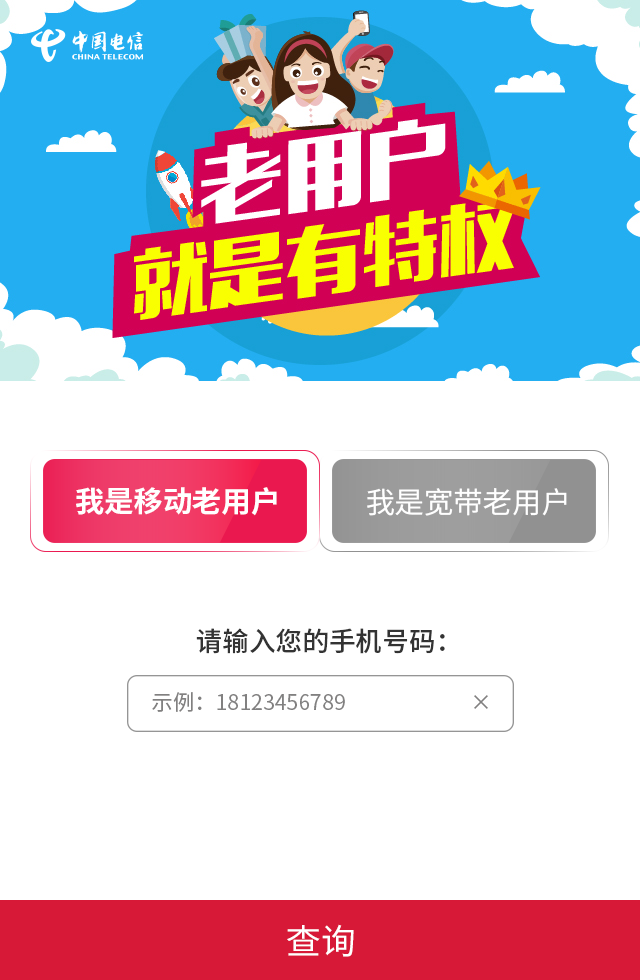
<style>
.page{position:relative;width:640px;height:980px;background:#ffffff}
.page>*{position:absolute;margin:0}
.t1{font:29.3px "SourceHanSansCN-Bold";color:#ffffff}
.t2{font:29.3px "SourceHanSansCN-Regular";color:#ffffff}
.t3{font:26.7px "SourceHanSansCN-Medium";color:#333333}
.t4{font:21.3px "SourceHanSansCN-Regular";color:#818080}
.t5{font:34.7px "SourceHanSansCN-Regular";color:#ffffff}
</style>
<div class="page">
<p class="t1" style="left:76px;top:487px;width:201px;height:29px">我是移动老用户</p>
<p class="t2" style="left:367px;top:488px;width:200px;height:28px">我是宽带老用户</p>
<p class="t3" style="left:196px;top:628px;width:249px;height:26px">请输入您的手机号码：</p>
<p class="t4" style="left:152px;top:692px;width:336px;height:20px">示例：18123456789                          ×</p>
<p class="t5" style="left:287px;top:924px;width:67px;height:33px">查询</p>
</div>
